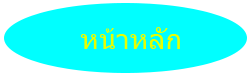
<style>
.page{position:relative;width:250px;height:75px;background:#00ffff}
.page>*{position:absolute;margin:0}
.t1{font:28px "Tahoma";color:#e6ff03}
</style>
<div class="page">
<p class="t1" style="left:80px;top:27px;width:100px;height:22px">หน้าหลัก</p>
</div>
